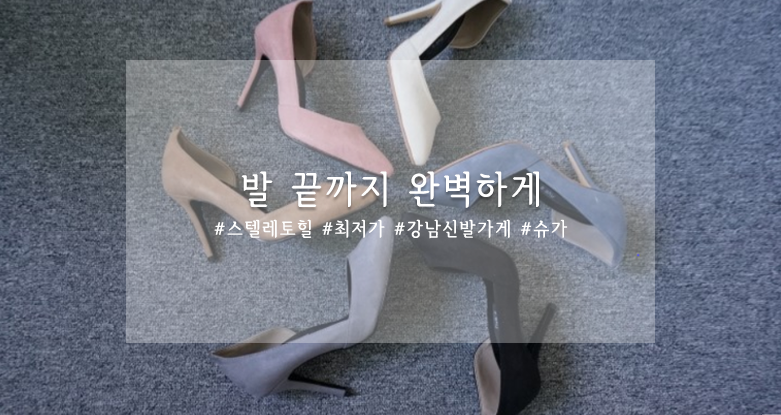
<style>
.page{position:relative;width:781px;height:415px}
.page>*{position:absolute;margin:0}
.t1{font:38.1px "SeH-CM";letter-spacing:0.085em;color:#ffffff}
.t2{font:19.1px "SeH-CM";letter-spacing:0.085em;color:#ffffff;scale:1.04 1}
</style>
<div class="page">
<p class="t1" style="left:241px;top:171px;width:298px;height:37px">발 끝까지 완벽하게</p>
<p class="t2" style="left:214px;top:219px;width:354px;height:20px">#스텔레토힐 #최저가 #강남신발가게 #슈가</p>
</div>
